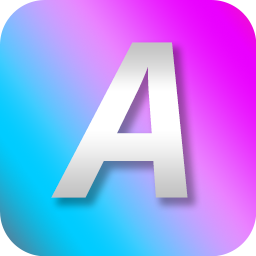
<style>
.page{position:relative;width:256px;height:256px}
.page>*{position:absolute;margin:0}
.t1{font:216px "OpenSans-BoldItalic";color:#eeeeee}
</style>
<div class="page">
<p class="t1" style="left:51px;top:42px;width:137px;height:156px">A</p>
</div>
